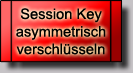
<style>
.page{position:relative;width:133px;height:73px}
.page>*{position:absolute;margin:0}
.t1{font:14.7px "ArialMT";color:#000000}
</style>
<div class="page">
<p class="t1" style="left:16px;top:8px;width:90px;height:47px;text-align:center">Session Key<br>asymmetrisch<br>verschlüsseln</p>
</div>
